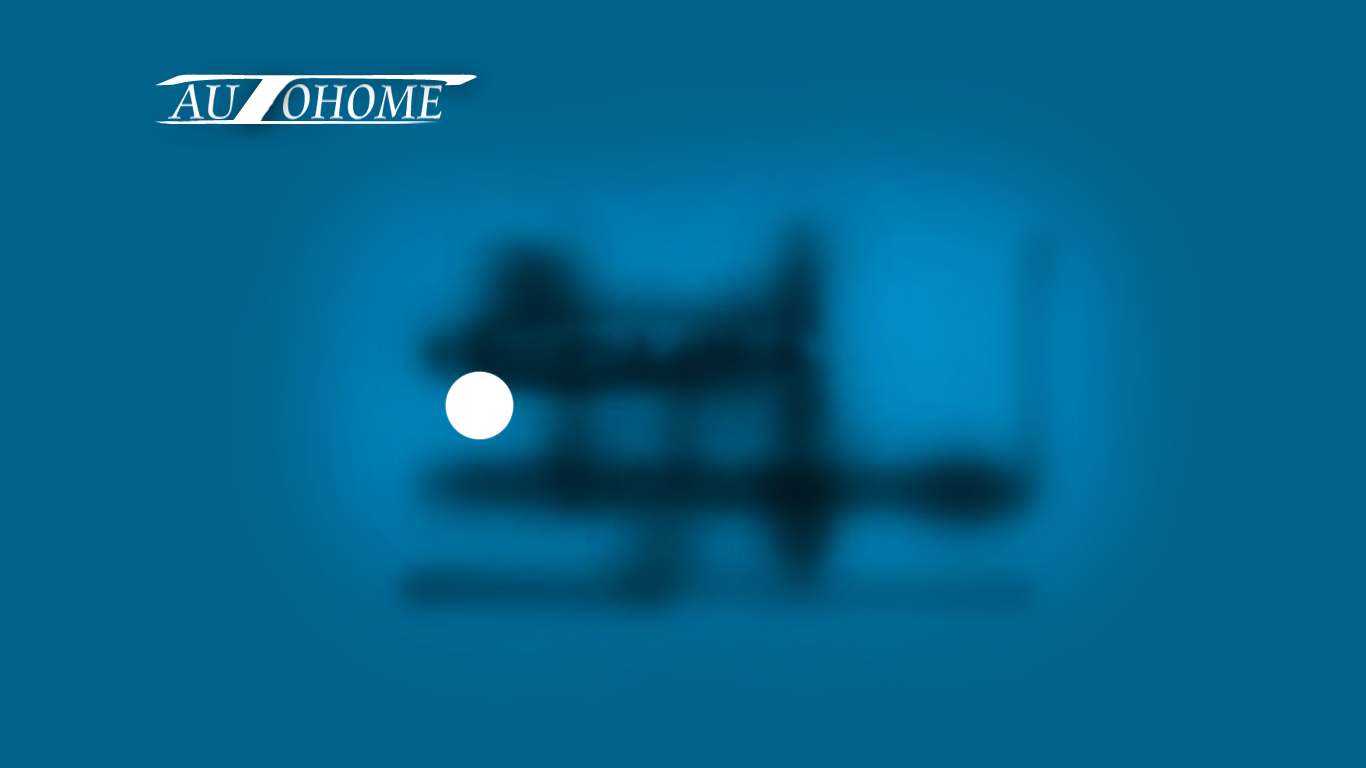
<style>
.page{position:relative;width:1366px;height:768px;background:#01628b}
.page>*{position:absolute;margin:0}
.t1{font:51.6px "CataneoBT-Regular";color:#ffffff;scale:0.91 1}
</style>
<div class="page">
<p class="t1" style="left:283px;top:84px;width:159px;height:36px">OHOME</p>
</div>
